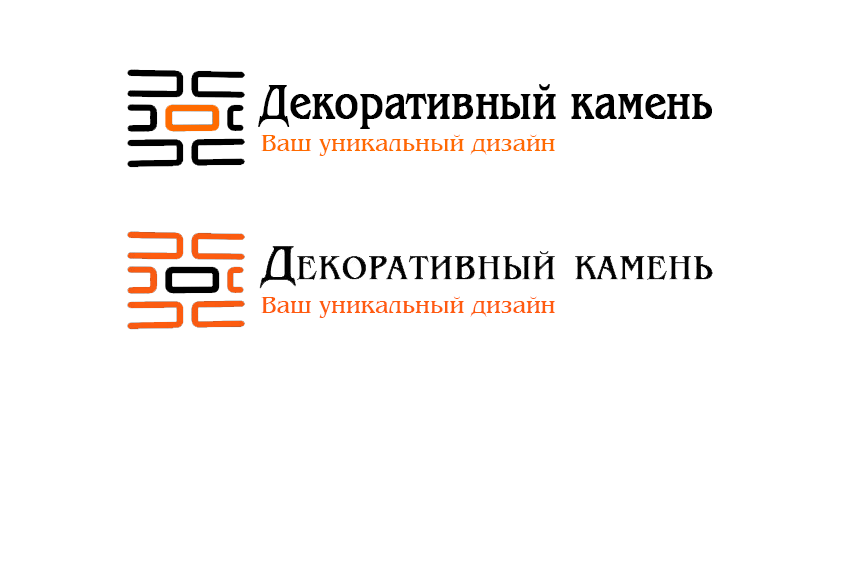
<style>
.page{position:relative;width:850px;height:567px;background:#ffffff}
.page>*{position:absolute;margin:0}
.t1{font:49.5px "Benguiat";color:#000000;font-weight:bold;scale:0.78 1}
.t2{font:24px "Benguiat";color:#ff6b00}
.t3{font:24px "Benguiat";color:#ff5c0f}
</style>
<div class="page">
<p class="t1" style="left:258px;top:84px;width:454px;height:45px">Декоративный камень</p>
<p class="t2" style="left:261px;top:134px;width:294px;height:22px">Ваш уникальный дизайн</p>
<p class="t3" style="left:261px;top:296px;width:294px;height:22px">Ваш уникальный дизайн</p>
</div>
